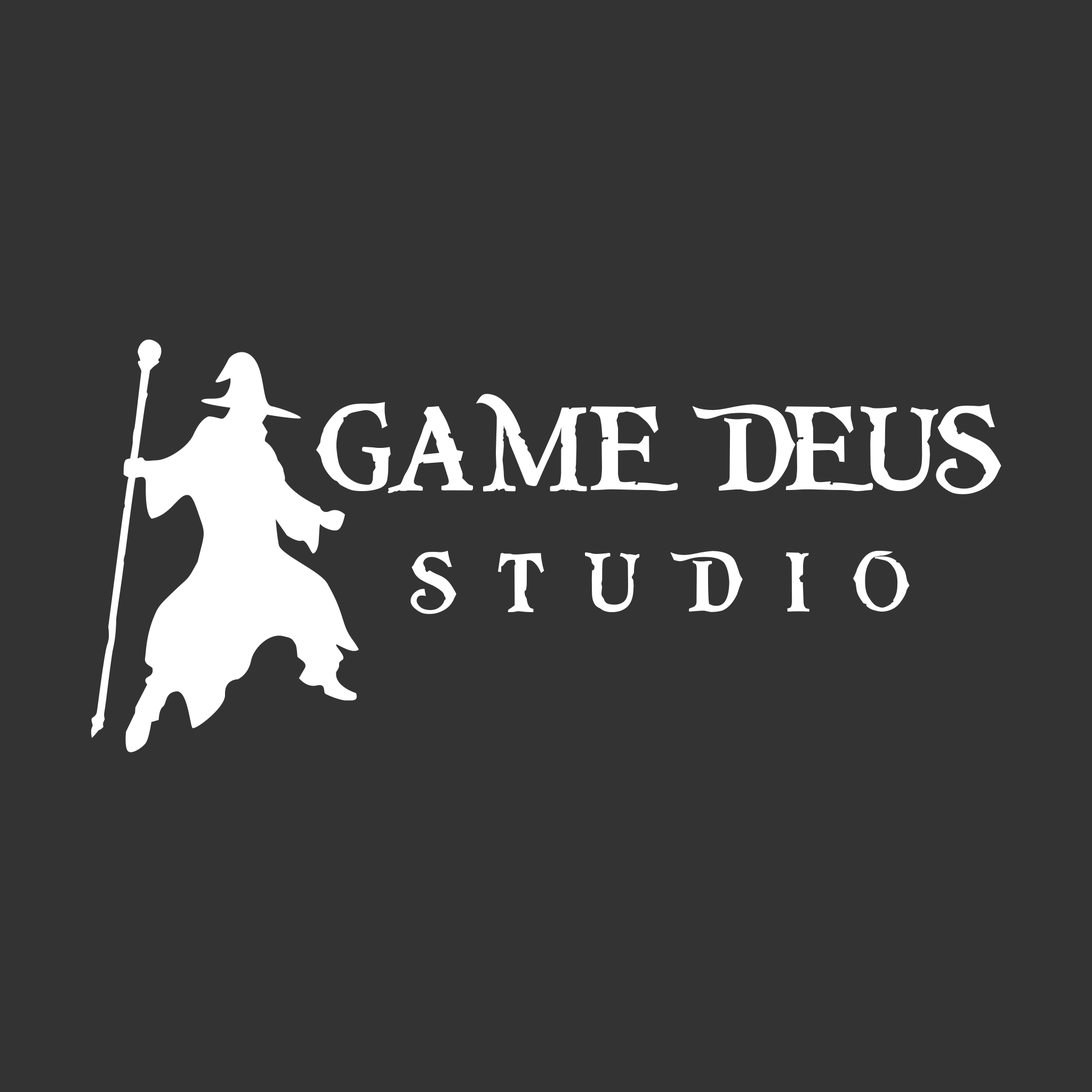
<style>
.page{position:relative;width:1092px;height:1092px;background:#333333}
.page>*{position:absolute;margin:0}
.t1{font:126.6px "PiecesofEight";letter-spacing:0.001em;color:#ffffff}
.t2{font:88.9px "PiecesofEight";letter-spacing:0.54em;color:#ffffff}
.t3{font:88.9px "PiecesofEight";letter-spacing:0.48em;color:#ffffff}
.t4{font:88.9px "PiecesofEight";letter-spacing:0.44em;color:#ffffff}
.t5{font:88.9px "PiecesofEight";letter-spacing:0.3em;color:#ffffff}
</style>
<div class="page">
<p class="t1" style="left:316px;top:393px;width:685px;height:101px">GAME DEUS</p>
<p class="t2" style="left:411px;top:551px;width:499px;height:63px"><span class="t3">S</span><span class="t4">T</span><span class="t5">U</span>DIO</p>
</div>
